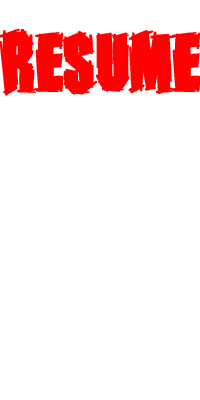
<style>
.page{position:relative;width:200px;height:400px;background:#ffffff}
.page>*{position:absolute;margin:0}
.t1{font:66.7px "GhostArmorRegular";color:#ff0000;font-weight:bold;scale:0.85 1}
</style>
<div class="page">
<p class="t1" style="left:0px;top:28px;width:201px;height:68px">Resume</p>
</div>
